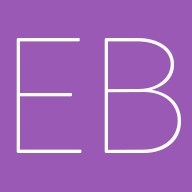
<style>
.page{position:relative;width:192px;height:192px;background:#9b59b6}
.page>*{position:absolute;margin:0}
.t1{font:165.7px "AgeoPersonalUse-Thin";color:#ffffff}
</style>
<div class="page">
<p class="t1" style="left:16px;top:38px;width:165px;height:115px">EB</p>
</div>
